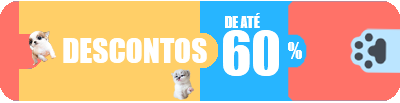
<style>
.page{position:relative;width:400px;height:103px;background:#ffcf68}
.page>*{position:absolute;margin:0}
.t1{font:14.6px "Impact";color:#ffffff}
.t2{font:56.2px "Impact";color:#ffffff}
.t3{font:31.2px "Impact";color:#ffffff}
.t4{font:20.8px "Impact";color:#ffffff}
</style>
<div class="page">
<p class="t1" style="left:225px;top:13px;width:35px;height:15px">DE ATÉ</p>
<p class="t2" style="left:223px;top:30px;width:56px;height:46px">60</p>
<p class="t3" style="left:63px;top:38px;width:144px;height:25px">DESCONTOS</p>
<p class="t4" style="left:288px;top:42px;width:14px;height:17px">%</p>
</div>
